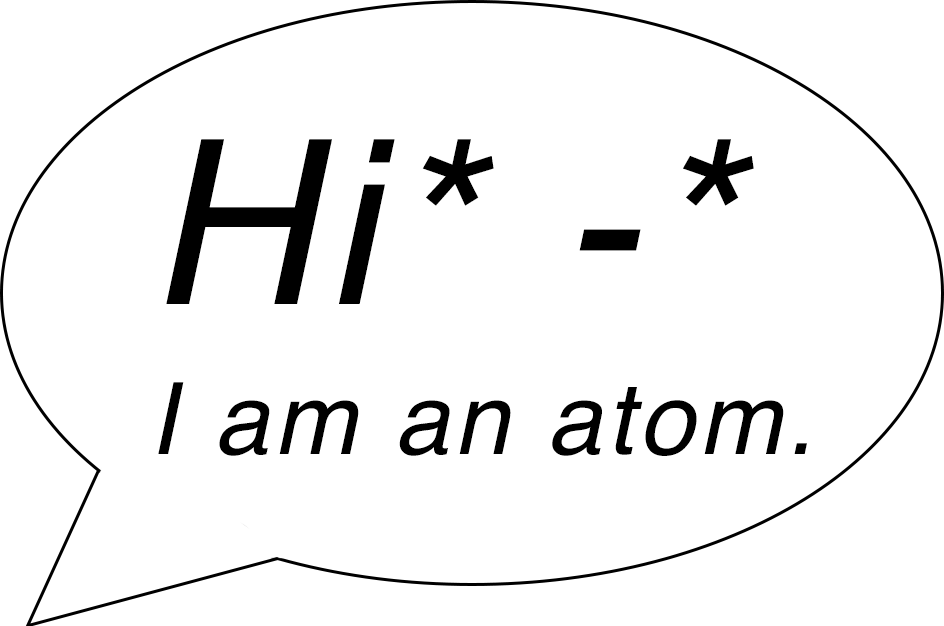
<style>
.page{position:relative;width:944px;height:626px;background:#ffffff}
.page>*{position:absolute;margin:0}
.t1{font:100px/150px "Helvetica-Oblique";letter-spacing:0.045em;color:#000000}
.t2{font:229.2px/150px "Helvetica-Oblique";letter-spacing:0.045em;color:#000000}
</style>
<div class="page">
<p class="t1" style="left:158px;top:139px;width:649px;height:317px"><span class="t2">Hi* -*<br></span>I am an atom.</p>
</div>
